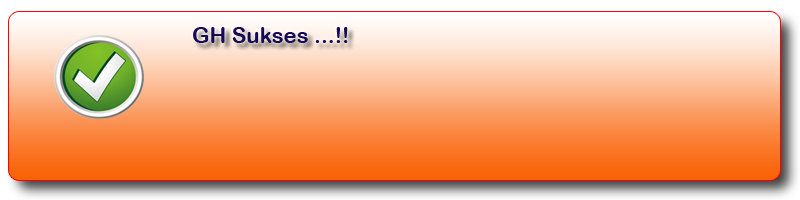
<style>
.page{position:relative;width:800px;height:200px}
.page>*{position:absolute;margin:0}
.t1{font:22px "ArialRoundedMTBold";color:#190659}
</style>
<div class="page">
<p class="t1" style="left:193px;top:27px;width:155px;height:16px">GH Sukses ...!!</p>
</div>
